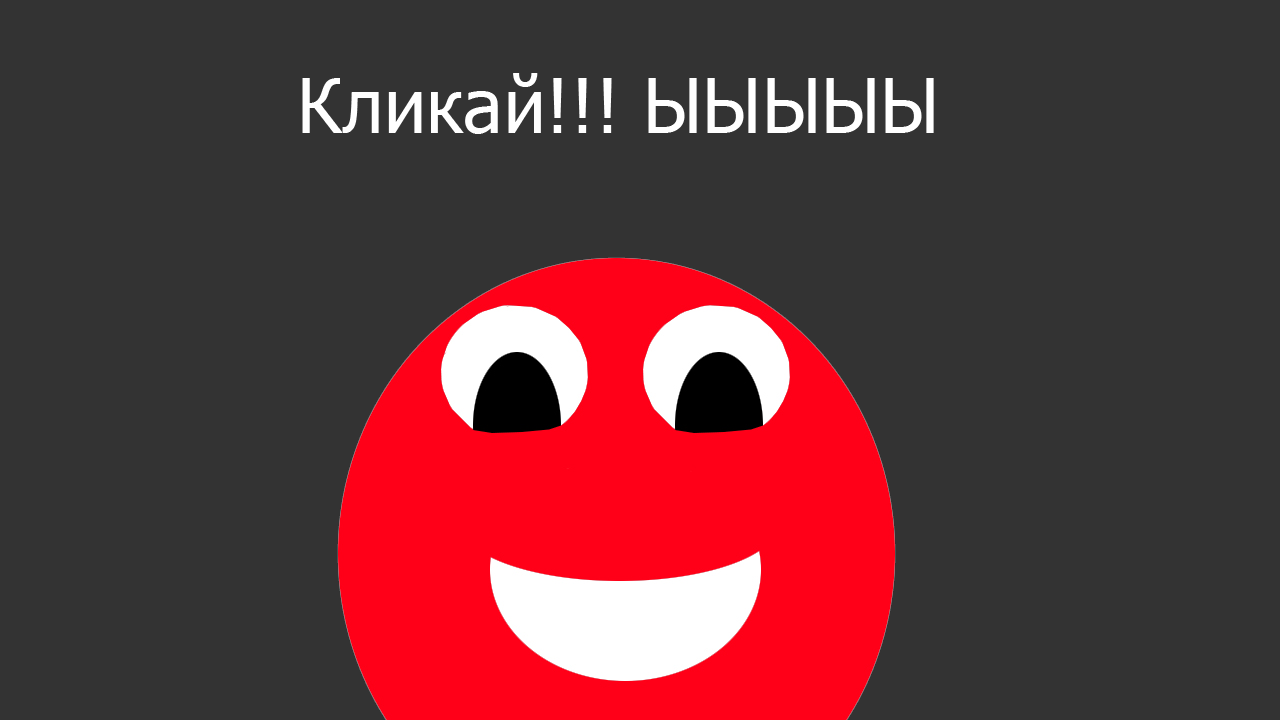
<style>
.page{position:relative;width:1280px;height:720px;background:#333333}
.page>*{position:absolute;margin:0}
.t1{font:75px "Tahoma";color:#ffffff}
</style>
<div class="page">
<p class="t1" style="left:302px;top:73px;width:632px;height:61px">Кликай!!! ЫЫЫЫЫ</p>
</div>
